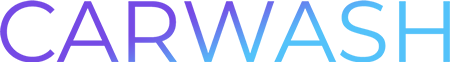
<style>
.page{position:relative;width:450px;height:62px;background:#ffffff}
.page>*{position:absolute;margin:0}
.t1{font:86.8px "Montserrat-Regular"}
</style>
<div class="page">
<p class="t1" style="left:0px;top:0px;width:450px;height:64px">CARWASH</p>
</div>
